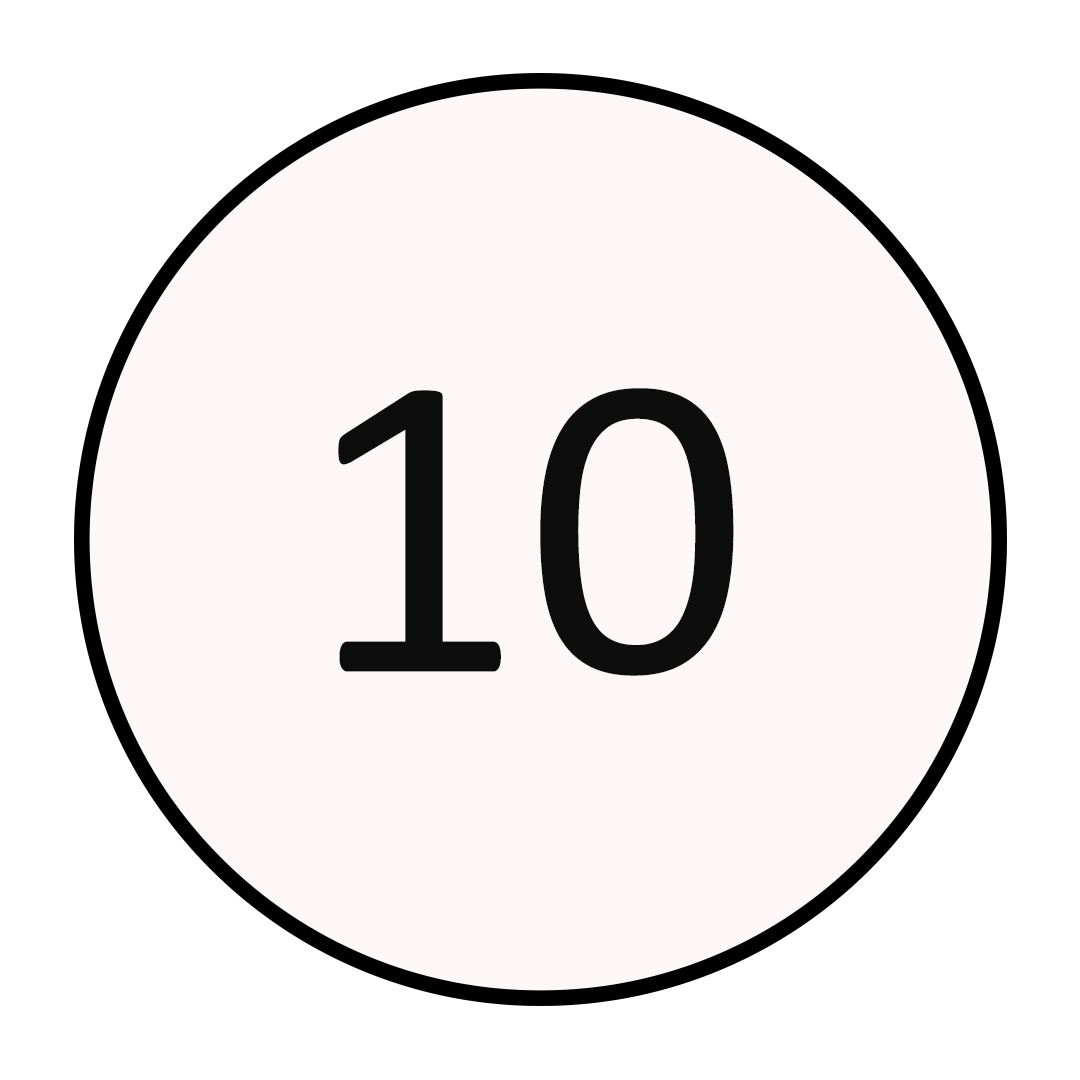
<style>
.page{position:relative;width:1080px;height:1080px;background:#fef7f7}
.page>*{position:absolute;margin:0}
.t1{font:441.7px "Calibri";color:#0e0d0d}
</style>
<div class="page">
<p class="t1" style="left:338px;top:388px;width:396px;height:288px">10</p>
</div>
